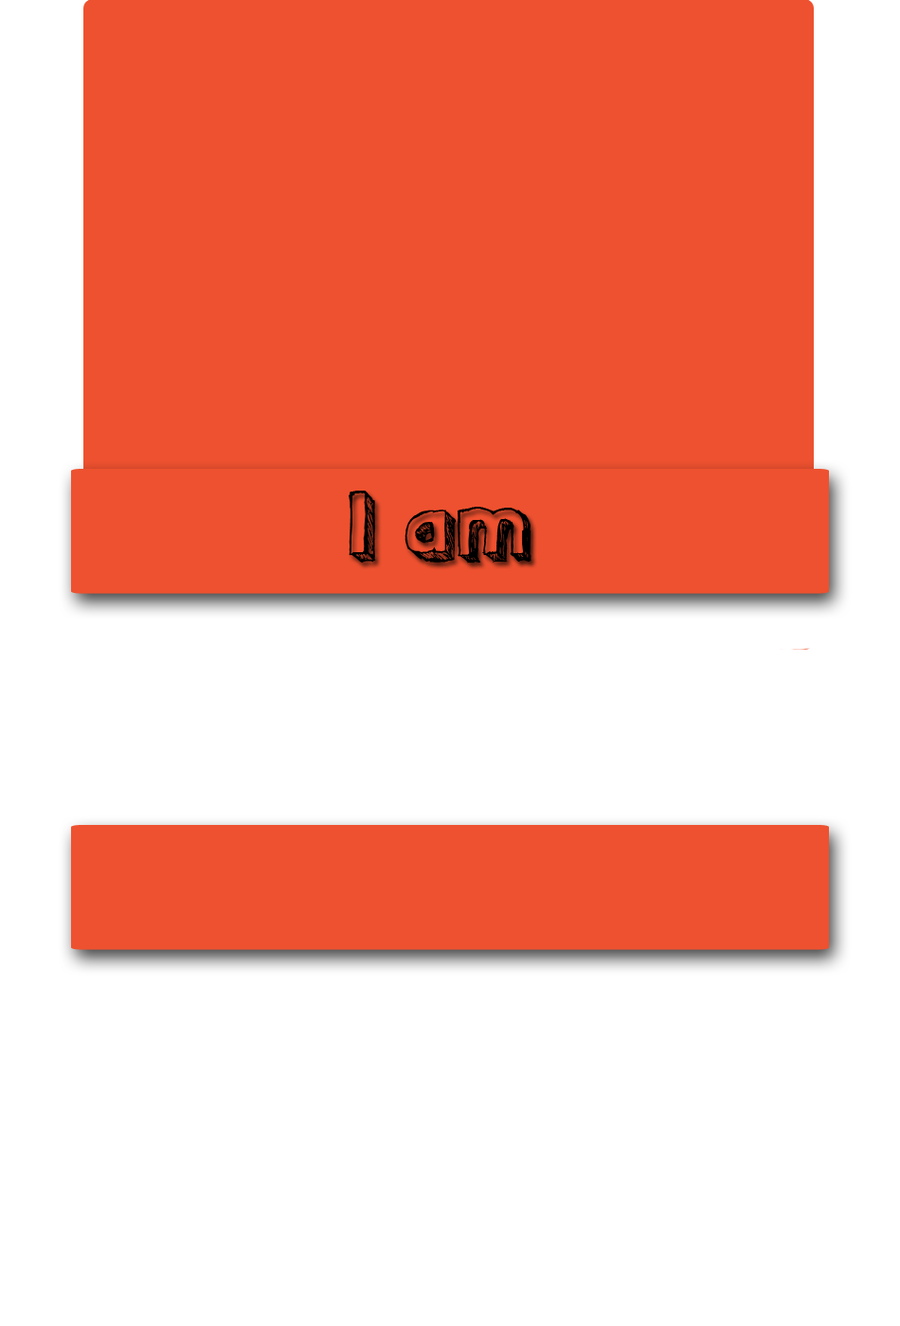
<style>
.page{position:relative;width:900px;height:1326px;background:#ffffff}
.page>*{position:absolute;margin:0}
.t1{font:94.7px "Pointy";color:#000000}
</style>
<div class="page">
<p class="t1" style="left:348px;top:490px;width:183px;height:73px">I am</p>
</div>
